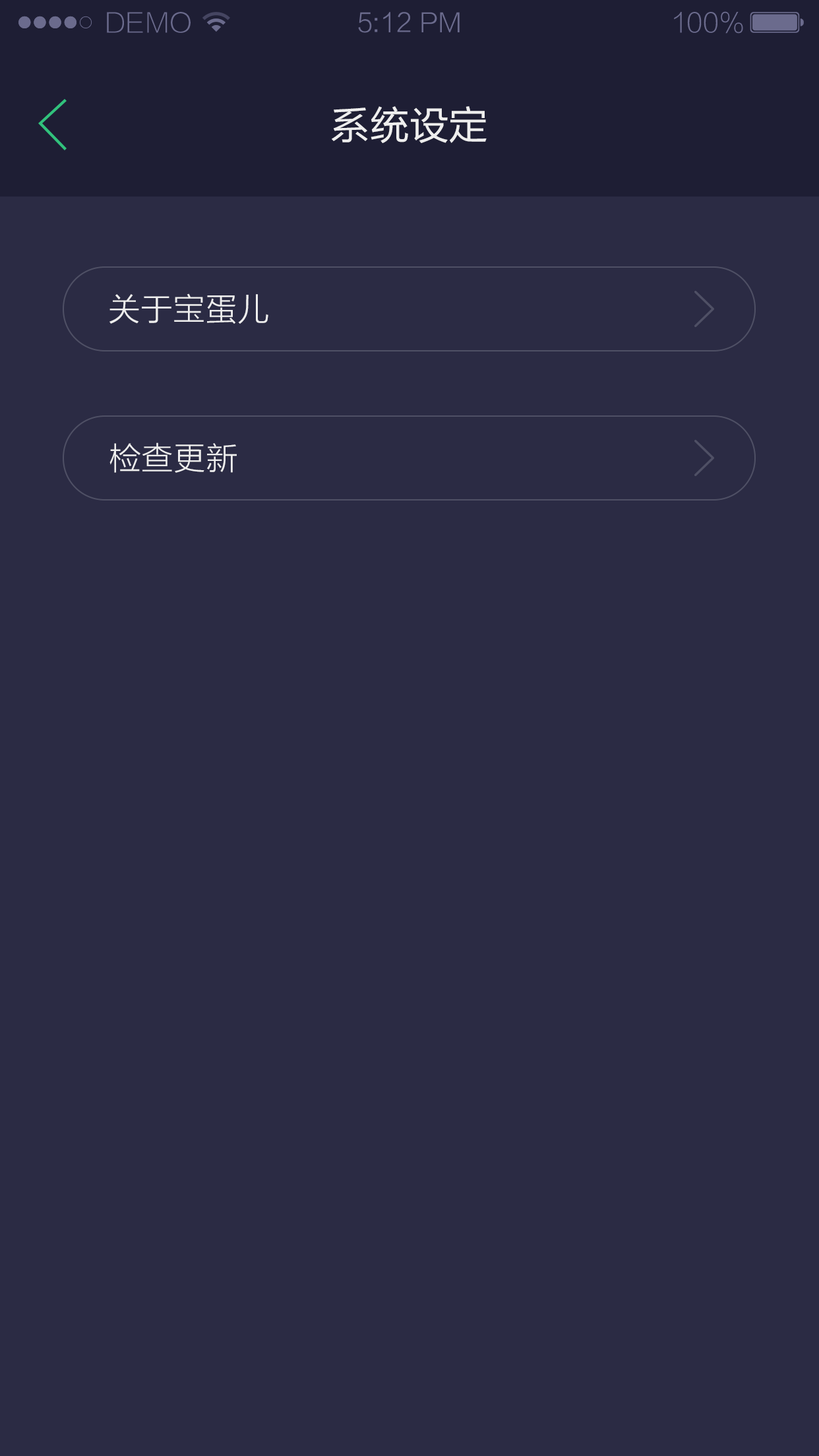
<style>
.page{position:relative;width:819px;height:1456px;background:#2b2b44}
.page>*{position:absolute;margin:0}
.t1{font:26.2px "FZLTXHK--GBK1-0";color:#6b6b8d;text-transform:uppercase}
.t2{font:26.2px "FZLTXHK";color:#6b6b8d}
.t3{font:26.2px "FZLTXHK--GBK1-0";color:#6b6b8d}
.t4{font:39.3px "FZLTHJW--GB1-0";color:#eeeeee;text-transform:uppercase}
.t5{font:32.3px "FZLTXHK";color:#eeeeee}
</style>
<div class="page">
<p class="t1" style="left:107px;top:12px;width:84px;height:21px">demo</p>
<p class="t2" style="left:358px;top:12px;width:102px;height:21px">5:12 PM</p>
<p class="t3" style="left:674px;top:11px;width:69px;height:23px">100%</p>
<p class="t4" style="left:332px;top:106px;width:155px;height:37px">系统设定</p>
<p class="t5" style="left:109px;top:293px;width:159px;height:31px">关于宝蛋儿</p>
<p class="t5" style="left:109px;top:442px;width:128px;height:31px">检查更新</p>
</div>
